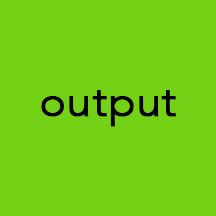
<style>
.page{position:relative;width:216px;height:216px;background:#73d216}
.page>*{position:absolute;margin:0}
.t1{font:43.8px "Avenir-Light";color:#000000;font-weight:bold}
</style>
<div class="page">
<p class="t1" style="left:41px;top:90px;width:135px;height:37px">output</p>
</div>
